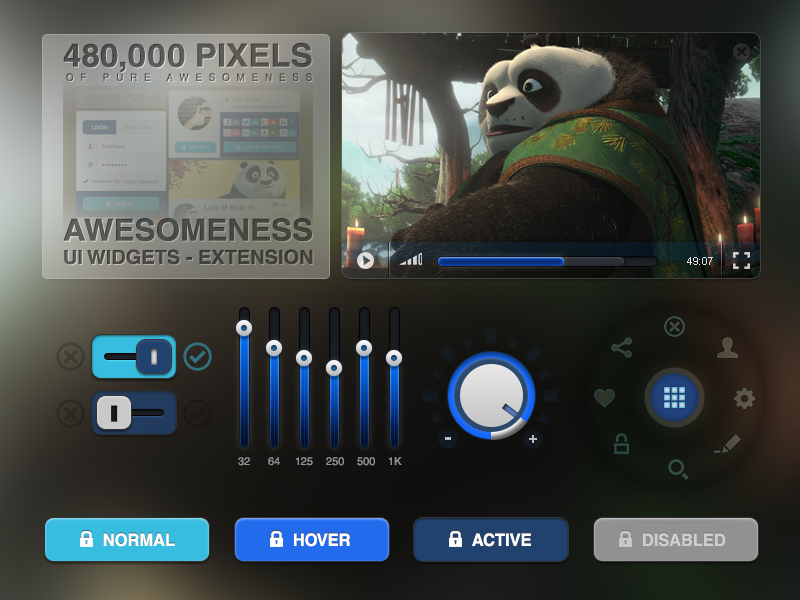
<style>
.page{position:relative;width:800px;height:600px}
.page>*{position:absolute;margin:0}
.t1{font:32.1px "HelveticaLTStd-Bold";color:#535351;text-transform:uppercase;scale:1.03 1}
.t2{font:10px "HelveticaLTStd-Roman";letter-spacing:0.71em;color:#585957;text-transform:uppercase}
.t3{font:19.4px "HelveticaLTStd-Bold";color:#464742;text-transform:uppercase;scale:1.03 1}
.t4{font:30.5px "HelveticaLTStd-Bold";color:#464742;text-transform:uppercase;scale:1.03 1}
.t5{font:11px "ArialMT";color:#dedfdf}
.t6{font:16px "MyriadPro-Bold";color:#bbbbbb;text-transform:uppercase}
.t7{font:11px "HelveticaLTStd-Roman";color:#939494;text-transform:uppercase}
.t8{font:11px "HelveticaLTStd-Roman";color:#909090;text-transform:uppercase}
.t9{font:11px "HelveticaLTStd-Roman";color:#939393;text-transform:uppercase}
.t10{font:11px "HelveticaLTStd-Roman";color:#929393;text-transform:uppercase}
.t11{font:17px "HelveticaLTStd-Bold";color:#ffffff;text-transform:uppercase;scale:0.97 1}
.t12{font:17px "HelveticaLTStd-Bold";color:#cdcdcd;text-transform:uppercase;scale:0.97 1}
</style>
<div class="page">
<p class="t1" style="left:63px;top:42px;width:249px;height:31px">480,000 PIXELS</p>
<p class="t2" style="left:66px;top:73px;width:246px;height:8px">oF PURE AWESOMENESS</p>
<p class="t3" style="left:63px;top:218px;width:250px;height:47px"><span class="t4">Awesomeness<br></span>UI Widgets - EXTENsION</p>
<p class="t5" style="left:687px;top:257px;width:26px;height:8px">49:07</p>
<p class="t6" style="left:529px;top:435px;width:8px;height:8px">+</p>
<p class="t7" style="left:238px;top:457px;width:12px;height:9px">32</p>
<p class="t8" style="left:268px;top:457px;width:12px;height:9px">64</p>
<p class="t9" style="left:296px;top:457px;width:17px;height:9px">125</p>
<p class="t10" style="left:326px;top:457px;width:18px;height:9px">250</p>
<p class="t10" style="left:357px;top:457px;width:18px;height:9px">500</p>
<p class="t10" style="left:389px;top:457px;width:13px;height:8px">1K</p>
<p class="t11" style="left:103px;top:533px;width:72px;height:14px">Normal</p>
<p class="t11" style="left:294px;top:533px;width:56px;height:14px">Hover</p>
<p class="t11" style="left:472px;top:533px;width:59px;height:14px">Active</p>
<p class="t12" style="left:643px;top:533px;width:83px;height:14px">Disabled</p>
</div>
